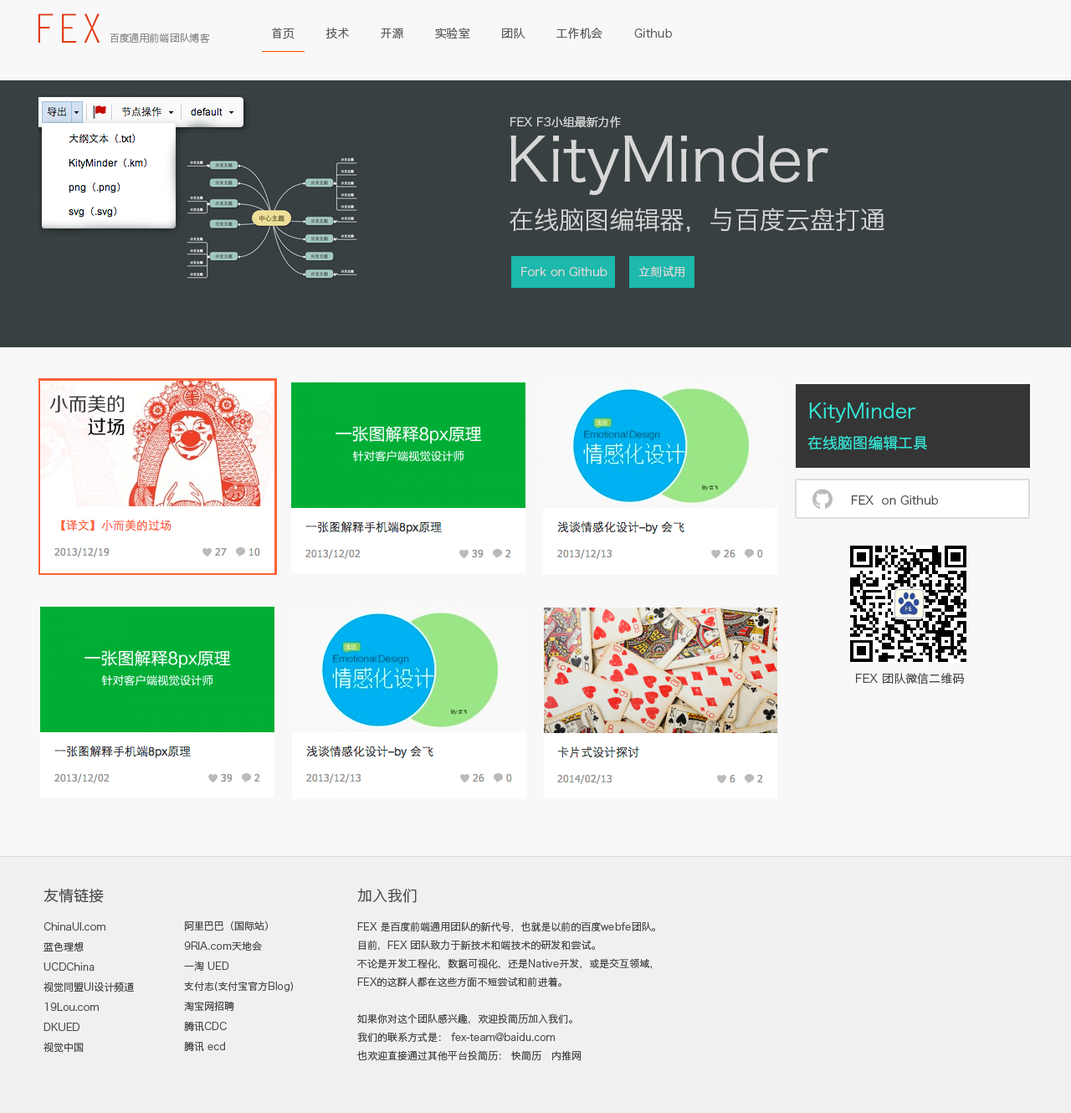
<style>
.page{position:relative;width:1071px;height:1113px;background:#f8f8f8}
.page>*{position:absolute;margin:0}
.t1{font:40.2px "LetterGothicStd";color:#e13b0f}
.t2{font:11.7px "HiraginoSansGB-W3";color:#5a5a5a}
.t3{font:10px "HiraginoSansGB-W3";color:#8e8e8e}
.t4{font:11.7px "HiraginoSansGB-W3";color:#d7d7d7}
.t5{font:60.3px "HiraginoSansGB-W3";color:#d7d7d7}
.t6{font:25.1px "HiraginoSansGB-W3";color:#d7d7d7}
.t7{font:20.1px "HiraginoSansGB-W3";color:#33e6d7}
.t8{font:15.1px "HiraginoSansGB-W3";color:#33e6d7}
.t9{font:11.7px "HiraginoSansGB-W3";color:#4a4a4a}
.t10{font:15.1px "HiraginoSansGB-W3";color:#4a4a4a}
.t11{font:10px/20.1px "HiraginoSansGB-W3";color:#4a4a4a}
.t12{font:10px/18.4px "HiraginoSansGB-W3";color:#4a4a4a}
</style>
<div class="page">
<p class="t1" style="left:38px;top:13px;width:62px;height:30px">FEX</p>
<p class="t2" style="left:272px;top:28px;width:400px;height:11px">首页        技术        开源        实验室        团队        工作机会        Github</p>
<p class="t3" style="left:110px;top:33px;width:100px;height:11px">百度通用前端团队博客</p>
<p class="t4" style="left:510px;top:116px;width:111px;height:12px">FEX F3小组最新力作</p>
<p class="t5" style="left:511px;top:136px;width:318px;height:59px">KityMinder</p>
<p class="t6" style="left:510px;top:208px;width:375px;height:25px">在线脑图编辑器，与百度云盘打通</p>
<p class="t4" style="left:521px;top:267px;width:87px;height:9px">Fork on Github</p>
<p class="t4" style="left:639px;top:266px;width:46px;height:11px">立刻试用</p>
<p class="t7" style="left:809px;top:403px;width:107px;height:20px">KityMinder</p>
<p class="t8" style="left:808px;top:435px;width:119px;height:15px">在线脑图编辑工具</p>
<p class="t9" style="left:851px;top:495px;width:87px;height:10px">FEX  on Github</p>
<p class="t9" style="left:855px;top:673px;width:109px;height:12px">FEX 团队微信二维码</p>
<p class="t10" style="left:44px;top:888px;width:60px;height:15px">友情链接</p>
<p class="t10" style="left:357px;top:888px;width:60px;height:15px">加入我们</p>
<p class="t11" style="left:44px;top:922px;width:90px;height:131px">ChinaUI.com<br>蓝色理想<br>UCDChina<br>视觉同盟UI设计频道<br>19Lou.com <br>DKUED<br>视觉中国</p>
<p class="t11" style="left:184px;top:921px;width:109px;height:131px">阿里巴巴（国际站）<br>9RIA.com天地会<br>一淘 UED<br>支付志(支付宝官方Blog)<br>淘宝网招聘<br>腾讯CDC<br>腾讯 ecd</p>
<p class="t12" style="left:357px;top:921px;width:298px;height:140px">FEX 是百度前端通用团队的新代号，也就是以前的百度webfe团队。<br>目前，FEX 团队致力于新技术和端技术的研发和尝试。<br>不论是开发工程化，数据可视化，还是Native开发，或是交互领域，<br>FEX的这群人都在这些方面不短尝试和前进着。<br><br>如果你对这个团队感兴趣，欢迎投简历加入我们。<br>我们的联系方式是： fex-team@baidu.com<br>也欢迎直接通过其他平台投简历： 快简历   内推网</p>
</div>
